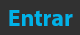
<style>
.page{position:relative;width:80px;height:35px;background:#313131}
.page>*{position:absolute;margin:0}
.t1{font:23.5px "MyriadPro-Bold";color:#00b2e8}
</style>
<div class="page">
<p class="t1" style="left:9px;top:10px;width:64px;height:16px">Entrar</p>
</div>
